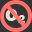
<style>
.page{position:relative;width:32px;height:32px;background:#333333}
.page>*{position:absolute;margin:0}
.t1{font:18px "FranklinGothic-Heavy"}
.t2{font:12px "FranklinGothic-Heavy"}
</style>
<div class="page">
<p class="t1" style="left:5px;top:9px;width:13px;height:12px">O</p>
<p class="t2" style="left:18px;top:15px;width:7px;height:8px">2</p>
</div>
